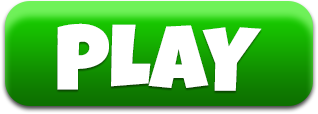
<style>
.page{position:relative;width:318px;height:114px;background:#ffffff}
.page>*{position:absolute;margin:0}
.t1{font:91px "LuckiestGuy-Regular";color:#ffffff;text-transform:uppercase}
</style>
<div class="page">
<p class="t1" style="left:57px;top:23px;width:205px;height:68px">play</p>
</div>
